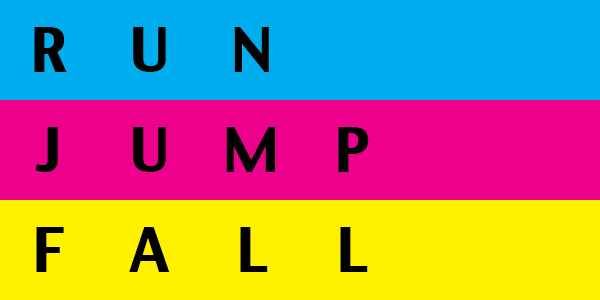
<style>
.page{position:relative;width:600px;height:300px;background:#ed008c}
.page>*{position:absolute;margin:0}
.t1{font:60px "CharcoalCY";color:#000000}
</style>
<div class="page">
<p class="t1" style="left:34px;top:27px;width:33px;height:45px">R</p>
<p class="t1" style="left:133px;top:27px;width:33px;height:45px">U</p>
<p class="t1" style="left:234px;top:27px;width:35px;height:45px">N</p>
<p class="t1" style="left:35px;top:127px;width:23px;height:45px">J</p>
<p class="t1" style="left:133px;top:127px;width:33px;height:45px">U</p>
<p class="t1" style="left:226px;top:127px;width:49px;height:45px">M</p>
<p class="t1" style="left:338px;top:127px;width:31px;height:45px">P</p>
<p class="t1" style="left:36px;top:227px;width:28px;height:45px">F</p>
<p class="t1" style="left:129px;top:227px;width:41px;height:45px">A</p>
<p class="t1" style="left:240px;top:227px;width:28px;height:45px">L</p>
<p class="t1" style="left:340px;top:227px;width:28px;height:45px">L</p>
</div>
